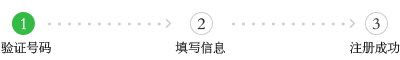
<style>
.page{position:relative;width:400px;height:60px;background:#ffffff}
.page>*{position:absolute;margin:0}
.t1{font:16.7px "FZSYJW--GB1-0";color:#fcfcfc}
.t2{font:16.7px "FZSYJW--GB1-0";color:#333333}
.t3{font:16.7px "FZSYJW--GB1-0"}
.t4{font:12.5px "FZSYJW--GB1-0"}
</style>
<div class="page">
<p class="t1" style="left:21px;top:18px;width:5px;height:12px">1</p>
<p class="t2" style="left:197px;top:18px;width:8px;height:12px">2</p>
<p class="t3" style="left:372px;top:18px;width:8px;height:12px">3</p>
<p class="t4" style="left:1px;top:41px;width:50px;height:13px">验证号码</p>
<p class="t4" style="left:175px;top:41px;width:51px;height:13px">填写信息</p>
<p class="t4" style="left:350px;top:41px;width:50px;height:13px">注册成功</p>
</div>
